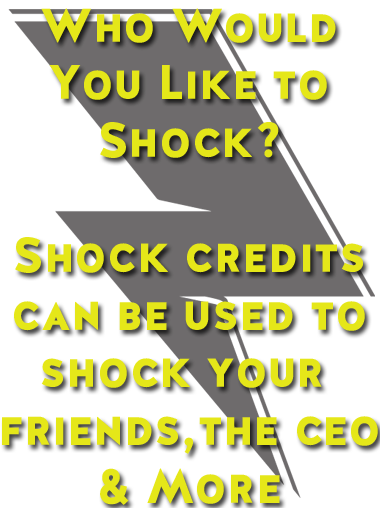
<style>
.page{position:relative;width:380px;height:508px;background:#ffffff}
.page>*{position:absolute;margin:0}
.t1{font:48px "HalisGR-SBlack";color:#e5e719}
</style>
<div class="page">
<p class="t1" style="left:2px;top:8px;width:376px;height:497px;text-align:center">Who Would<br>You Like to<br>Shock?<br><br>Shock credits<br>can be used to<br>shock your <br>friends,the ceo<br>&amp; More</p>
</div>
